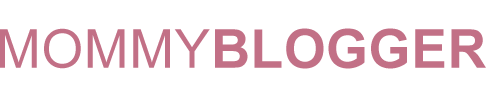
<style>
.page{position:relative;width:504px;height:97px;background:#ffffff}
.page>*{position:absolute;margin:0}
.t1{font:53.8px "Arial-BoldMT";letter-spacing:0.01em;color:#c27086}
.t2{font:53.8px "ArialMT";letter-spacing:0.01em;color:#c27086}
</style>
<div class="page">
<p class="t1" style="left:0px;top:28px;width:486px;height:41px"><span class="t2">MOMMY</span>BLOGGER</p>
</div>
